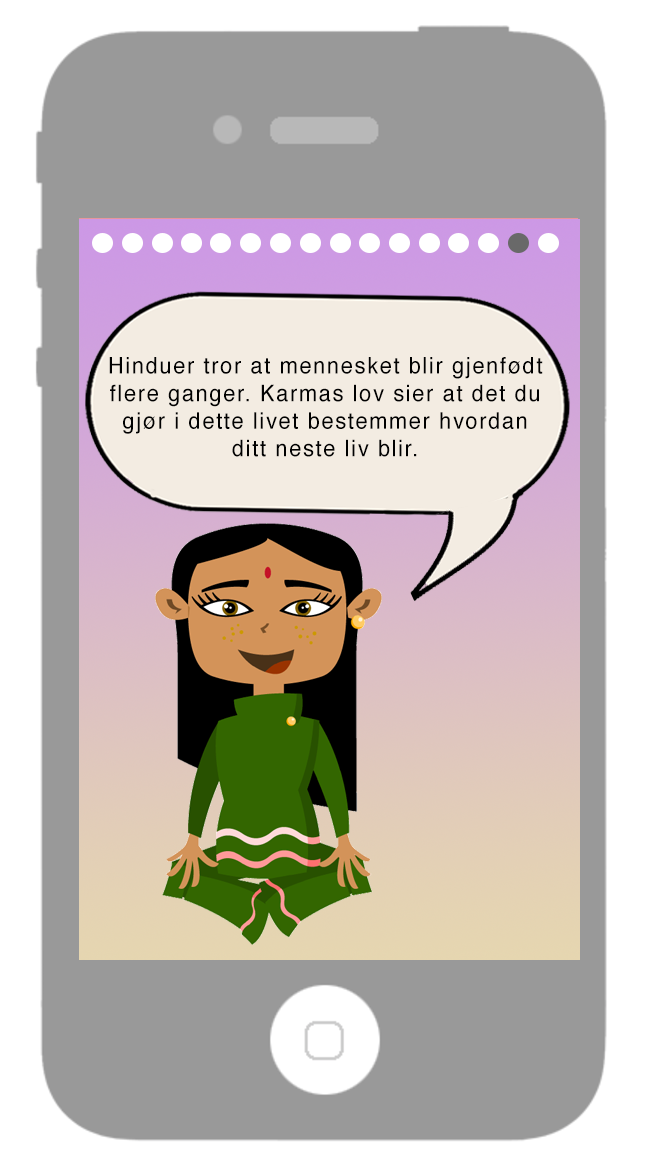
<style>
.page{position:relative;width:646px;height:1172px;background:#999999}
.page>*{position:absolute;margin:0}
.t1{font:11px "Helvetica";letter-spacing:0.075em;color:#010101;scale:0.95 1}
</style>
<div class="page">
<p class="t1" style="left:109px;top:357px;width:434px;height:100px;text-align:center">Hinduer tror at mennesket blir gjenfødt<br>flere ganger. Karmas lov sier at det du<br>gjør i dette livet bestemmer hvordan<br>ditt neste liv blir.</p>
</div>
